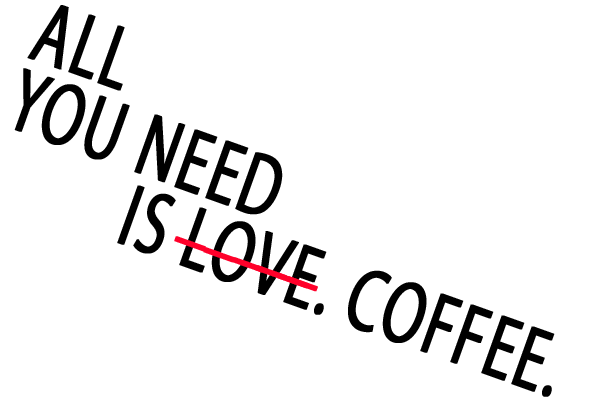
<style>
.page{position:relative;width:600px;height:420px;background:#ffffff}
.page>*{position:absolute;margin:0}
.t1{font:90px "MyriadPro-Regular";letter-spacing:0.025em;color:#000000;text-transform:uppercase;font-weight:bold;scale:0.67 1}
.t2{font:90px "MyriadPro-Regular";letter-spacing:0.025em;color:#ff002a;text-transform:uppercase;font-weight:bold;scale:0.67 1}
</style>
<div class="page">
<p class="t1" style="left:14px;top:5px;width:541px;height:392px;rotate:20deg">all<br>you need<br>    is love. coffee.</p>
<p class="t2" style="left:174px;top:236px;width:32px;height:16px;rotate:20deg">_</p>
<p class="t2" style="left:203px;top:247px;width:32px;height:16px;rotate:20deg">_</p>
<p class="t2" style="left:232px;top:257px;width:32px;height:16px;rotate:20deg">_</p>
<p class="t2" style="left:255px;top:265px;width:32px;height:16px;rotate:20deg">_</p>
<p class="t2" style="left:277px;top:273px;width:32px;height:16px;rotate:20deg">_</p>
<p class="t2" style="left:286px;top:276px;width:32px;height:16px;rotate:20deg">_</p>
</div>
